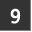
<style>
.page{position:relative;width:32px;height:32px;background:#333333}
.page>*{position:absolute;margin:0}
.t1{font:18px "MicrosoftYaHei";letter-spacing:-0.025em;color:#ffffff;font-weight:bold}
</style>
<div class="page">
<p class="t1" style="left:10px;top:8px;width:11px;height:16px">9</p>
</div>
